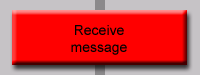
<style>
.page{position:relative;width:200px;height:75px;background:#ff0000}
.page>*{position:absolute;margin:0}
.t1{font:14px "ArialMT";color:#000000}
</style>
<div class="page">
<p class="t1" style="left:71px;top:25px;width:56px;height:30px;text-align:center">Receive<br>message</p>
</div>
